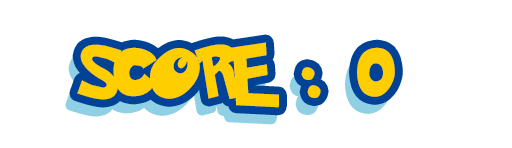
<style>
.page{position:relative;width:512px;height:148px;background:#ffffff}
.page>*{position:absolute;margin:0}
.t1{font:60px "PokemonSolidNormal";color:#ffce00}
</style>
<div class="page">
<p class="t1" style="left:77px;top:42px;width:318px;height:66px">SCORE : 0</p>
</div>
